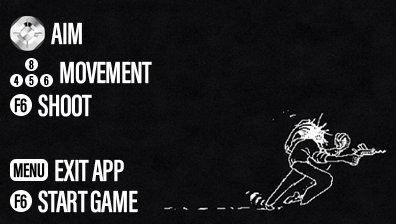
<style>
.page{position:relative;width:396px;height:224px}
.page>*{position:absolute;margin:0}
.t1{font:31.5px "AcuminConcept-ExtraCondensedSemibold";letter-spacing:-0.02em;color:#ffffff}
.t2{font:13.3px "AcuminConcept-ExtraCondensedSemibold";letter-spacing:-0.02em;color:#000000}
.t3{font:20.3px "AcuminConcept-ExtraCondensedSemibold";letter-spacing:-0.02em;color:#000000}
</style>
<div class="page">
<p class="t1" style="left:51px;top:22px;width:31px;height:23px">AIM</p>
<p class="t2" style="left:29px;top:60px;width:5px;height:10px">8</p>
<p class="t1" style="left:60px;top:61px;width:92px;height:23px">MOVEMENT</p>
<p class="t2" style="left:14px;top:76px;width:5px;height:10px">4</p>
<p class="t2" style="left:29px;top:76px;width:5px;height:10px">5</p>
<p class="t2" style="left:44px;top:76px;width:5px;height:10px">6</p>
<p class="t3" style="left:14px;top:98px;width:13px;height:15px">F6</p>
<p class="t1" style="left:38px;top:94px;width:54px;height:23px">SHOOT</p>
<p class="t1" style="left:55px;top:159px;width:69px;height:23px">EXIT APP</p>
<p class="t3" style="left:13px;top:163px;width:32px;height:15px">MENU</p>
<p class="t3" style="left:14px;top:194px;width:13px;height:15px">F6</p>
<p class="t1" style="left:38px;top:190px;width:100px;height:23px">START GAME</p>
</div>
